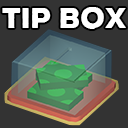
<style>
.page{position:relative;width:128px;height:128px;background:#333333}
.page>*{position:absolute;margin:0}
.t1{font:28px "SVN-NexaRushSansBlack";color:#ffffff;text-transform:uppercase}
</style>
<div class="page">
<p class="t1" style="left:2px;top:7px;width:124px;height:22px">TIP BOX</p>
</div>
